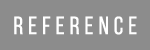
<style>
.page{position:relative;width:150px;height:50px;background:#8c8c8c}
.page>*{position:absolute;margin:0}
.t1{font:25px "BebasNeueRegular";letter-spacing:0.2em;color:#ffffff}
</style>
<div class="page">
<p class="t1" style="left:14px;top:16px;width:123px;height:19px">reference</p>
</div>
